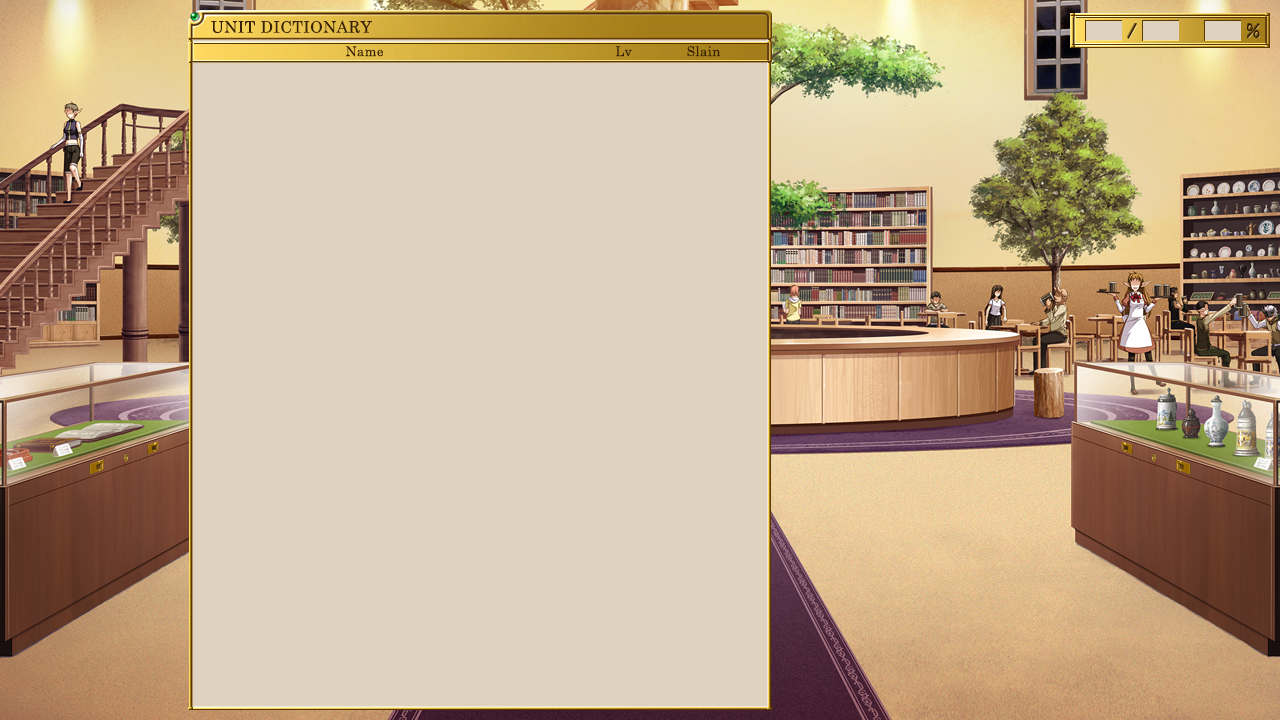
<style>
.page{position:relative;width:1280px;height:720px;background:#dfd3c0}
.page>*{position:absolute;margin:0}
.t1{font:16px "CenturySchoolbook";letter-spacing:0.025em;color:#382005}
.t2{font:13.3px "CenturySchoolbook";letter-spacing:0.025em;color:#382005}
</style>
<div class="page">
<p class="t1" style="left:211px;top:20px;width:161px;height:14px">UNIT DICTIONARY</p>
<p class="t2" style="left:346px;top:46px;width:37px;height:11px">Name</p>
<p class="t2" style="left:615px;top:46px;width:17px;height:11px">Lv</p>
<p class="t2" style="left:687px;top:46px;width:34px;height:11px">Slain</p>
</div>
